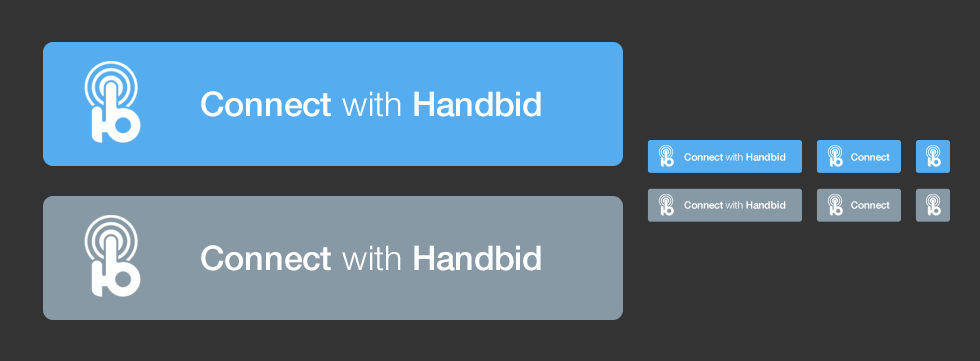
<style>
.page{position:relative;width:980px;height:361px;background:#333333}
.page>*{position:absolute;margin:0}
.t1{font:34px "HelveticaNeue-Medium";color:#ffffff}
.t2{font:34px "HelveticaNeue-Light";color:#ffffff}
.t3{font:10px "HelveticaNeue-Medium";color:#ffffff}
.t4{font:10px "HelveticaNeue-Light";color:#ffffff}
</style>
<div class="page">
<p class="t1" style="left:201px;top:91px;width:340px;height:26px">Connect <span class="t2">with</span> Handbid</p>
<p class="t3" style="left:684px;top:153px;width:102px;height:8px">Connect <span class="t4">with</span> Handbid</p>
<p class="t3" style="left:851px;top:153px;width:39px;height:8px">Connect</p>
<p class="t3" style="left:684px;top:201px;width:102px;height:8px">Connect <span class="t4">with</span> Handbid</p>
<p class="t3" style="left:851px;top:201px;width:39px;height:8px">Connect</p>
<p class="t1" style="left:201px;top:245px;width:340px;height:26px">Connect <span class="t2">with</span> Handbid</p>
</div>
